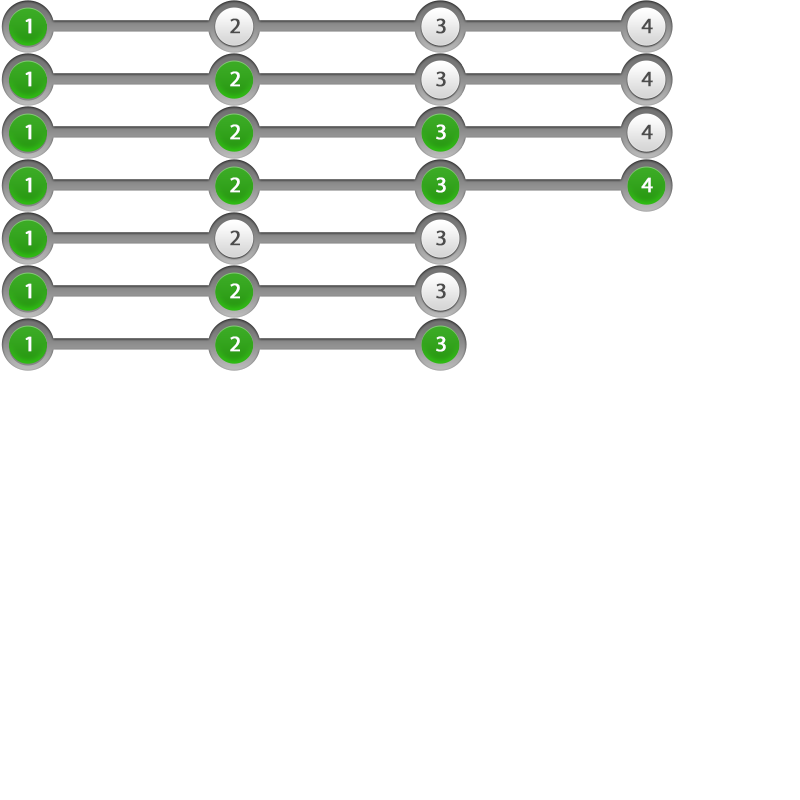
<style>
.page{position:relative;width:800px;height:800px;background:#ffffff}
.page>*{position:absolute;margin:0}
.t1{font:22px "MyriadPro-Regular";color:#ffffff;font-weight:bold}
.t2{font:22px "MyriadPro-Regular";color:#4c4c4c;font-weight:bold}
</style>
<div class="page">
<p class="t1" style="left:25px;top:18px;width:7px;height:16px">1</p>
<p class="t2" style="left:230px;top:18px;width:10px;height:16px">2</p>
<p class="t2" style="left:436px;top:18px;width:10px;height:16px">3</p>
<p class="t2" style="left:641px;top:18px;width:12px;height:16px">4</p>
<p class="t1" style="left:25px;top:71px;width:7px;height:16px">1</p>
<p class="t1" style="left:230px;top:71px;width:10px;height:16px">2</p>
<p class="t2" style="left:436px;top:71px;width:10px;height:16px">3</p>
<p class="t2" style="left:641px;top:71px;width:12px;height:16px">4</p>
<p class="t1" style="left:25px;top:124px;width:7px;height:16px">1</p>
<p class="t1" style="left:230px;top:124px;width:10px;height:16px">2</p>
<p class="t1" style="left:436px;top:124px;width:10px;height:16px">3</p>
<p class="t2" style="left:641px;top:124px;width:12px;height:16px">4</p>
<p class="t1" style="left:25px;top:177px;width:7px;height:16px">1</p>
<p class="t1" style="left:230px;top:177px;width:10px;height:16px">2</p>
<p class="t1" style="left:436px;top:177px;width:10px;height:16px">3</p>
<p class="t1" style="left:641px;top:177px;width:12px;height:16px">4</p>
<p class="t1" style="left:25px;top:230px;width:7px;height:16px">1</p>
<p class="t2" style="left:230px;top:230px;width:10px;height:16px">2</p>
<p class="t2" style="left:436px;top:230px;width:10px;height:16px">3</p>
<p class="t1" style="left:25px;top:283px;width:7px;height:16px">1</p>
<p class="t1" style="left:230px;top:283px;width:10px;height:16px">2</p>
<p class="t2" style="left:436px;top:283px;width:10px;height:16px">3</p>
<p class="t1" style="left:25px;top:336px;width:7px;height:16px">1</p>
<p class="t1" style="left:230px;top:336px;width:10px;height:16px">2</p>
<p class="t1" style="left:436px;top:336px;width:10px;height:16px">3</p>
</div>
